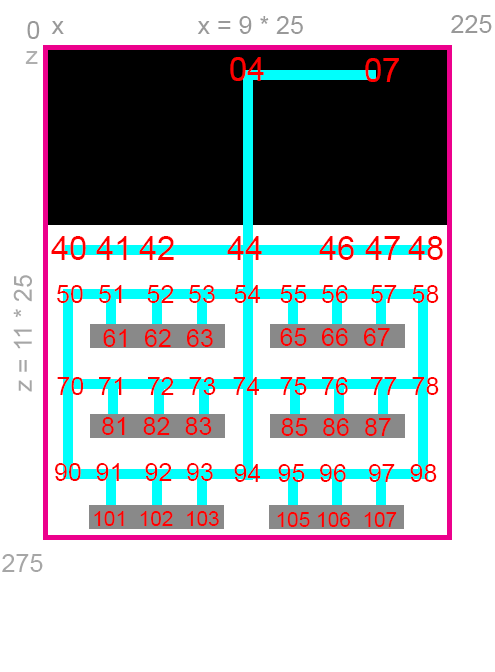
<style>
.page{position:relative;width:495px;height:672px;background:#ffffff}
.page>*{position:absolute;margin:0}
.t1{font:25px "ArialMT";color:#999999}
.t2{font:25px "ArialMT";color:#afafaf}
.t3{font:33.3px "ArialMT";color:#ff0000}
.t4{font:25px "ArialMT";color:#a6a6a6}
.t5{font:25px "ArialMT";color:#ff0000}
.t6{font:20.8px "ArialMT";color:#ff0000}
</style>
<div class="page">
<p class="t1" style="left:197px;top:16px;width:106px;height:18px">x = 9 * 25</p>
<p class="t1" style="left:451px;top:15px;width:41px;height:18px">225</p>
<p class="t1" style="left:27px;top:21px;width:13px;height:18px">0</p>
<p class="t1" style="left:51px;top:21px;width:13px;height:13px">x</p>
<p class="t2" style="left:25px;top:51px;width:13px;height:13px">z</p>
<p class="t3" style="left:230px;top:57px;width:34px;height:24px">04</p>
<p class="t3" style="left:365px;top:58px;width:34px;height:24px">07</p>
<p class="t3" style="left:51px;top:236px;width:35px;height:24px">40</p>
<p class="t3" style="left:96px;top:236px;width:31px;height:24px">41</p>
<p class="t3" style="left:139px;top:236px;width:35px;height:24px">42</p>
<p class="t3" style="left:227px;top:236px;width:35px;height:24px">44</p>
<p class="t3" style="left:319px;top:236px;width:35px;height:24px">46</p>
<p class="t3" style="left:365px;top:236px;width:35px;height:24px">47</p>
<p class="t3" style="left:408px;top:236px;width:35px;height:24px">48</p>
<p class="t4" style="left:13px;top:275px;width:19px;height:117px;rotate:-90deg">z = 11 * 25</p>
<p class="t5" style="left:57px;top:285px;width:158px;height:18px">50  51   52  53</p>
<p class="t5" style="left:234px;top:285px;width:26px;height:18px">54</p>
<p class="t5" style="left:280px;top:285px;width:159px;height:18px">55  56   57  58</p>
<p class="t5" style="left:103px;top:329px;width:110px;height:18px">61  62  63</p>
<p class="t5" style="left:280px;top:328px;width:110px;height:18px">65  66  67</p>
<p class="t5" style="left:57px;top:377px;width:159px;height:18px">70  71   72  73</p>
<p class="t5" style="left:233px;top:377px;width:26px;height:18px">74</p>
<p class="t5" style="left:280px;top:377px;width:159px;height:18px">75  76   77  78</p>
<p class="t5" style="left:102px;top:417px;width:110px;height:18px">81  82  83</p>
<p class="t5" style="left:281px;top:418px;width:110px;height:18px">85  86  87</p>
<p class="t5" style="left:55px;top:463px;width:158px;height:18px">90  91   92  93</p>
<p class="t5" style="left:234px;top:464px;width:26px;height:18px">94</p>
<p class="t5" style="left:278px;top:464px;width:159px;height:18px">95  96   97  98</p>
<p class="t6" style="left:94px;top:511px;width:125px;height:15px">101  102  103</p>
<p class="t6" style="left:277px;top:512px;width:120px;height:15px">105 106  107</p>
<p class="t4" style="left:2px;top:554px;width:41px;height:18px">275</p>
</div>
